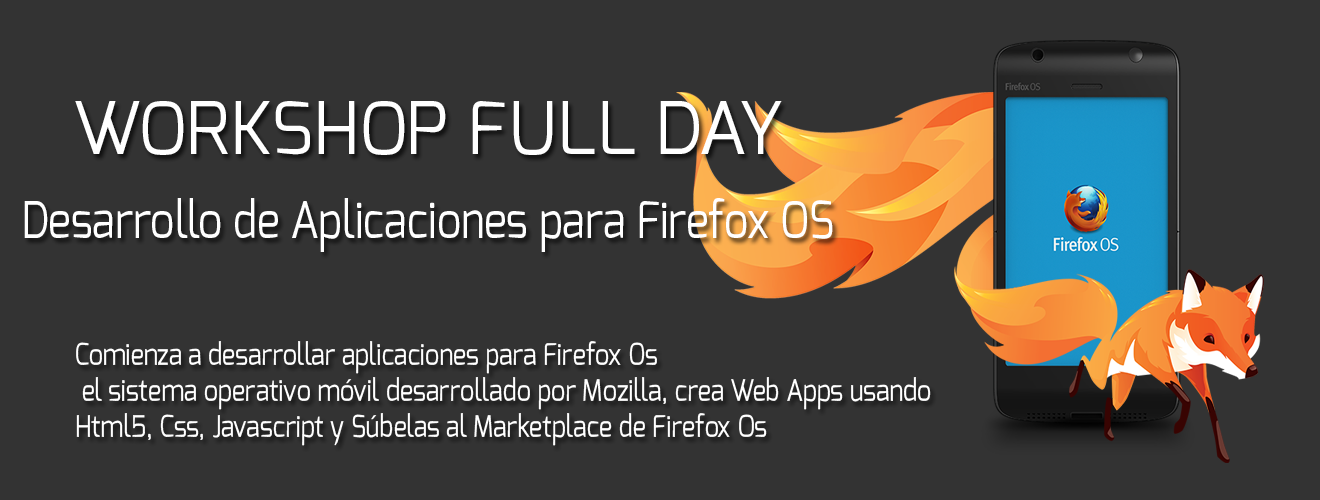
<style>
.page{position:relative;width:1320px;height:500px;background:#333333}
.page>*{position:absolute;margin:0}
.t1{font:72px "Exo-Regular";color:#ffffff}
.t2{font:50.7px "Exo-Regular";color:#ffffff;scale:0.84 1}
.t3{font:30px "Exo-Regular";color:#ffffff;scale:0.84 1}
</style>
<div class="page">
<p class="t1" style="left:75px;top:101px;width:707px;height:54px">WORKSHOP FULL DAY</p>
<p class="t2" style="left:24px;top:198px;width:809px;height:54px">Desarrollo de Aplicaciones para Firefox OS</p>
<p class="t3" style="left:76px;top:341px;width:855px;height:105px">Comienza a desarrollar aplicaciones para Firefox Os<br> el sistema operativo móvil desarrollado por Mozilla, crea Web Apps usando <br>Html5, Css, Javascript y Súbelas al Marketplace de Firefox Os</p>
</div>
